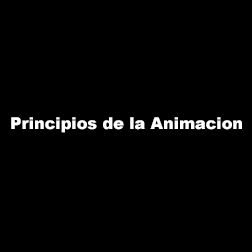
<style>
.page{position:relative;width:252px;height:252px;background:#000000}
.page>*{position:absolute;margin:0}
.t1{font:16.3px "Arial-Black";color:#ffffff}
</style>
<div class="page">
<p class="t1" style="left:11px;top:117px;width:231px;height:16px">Principios de la Animacion</p>
</div>
